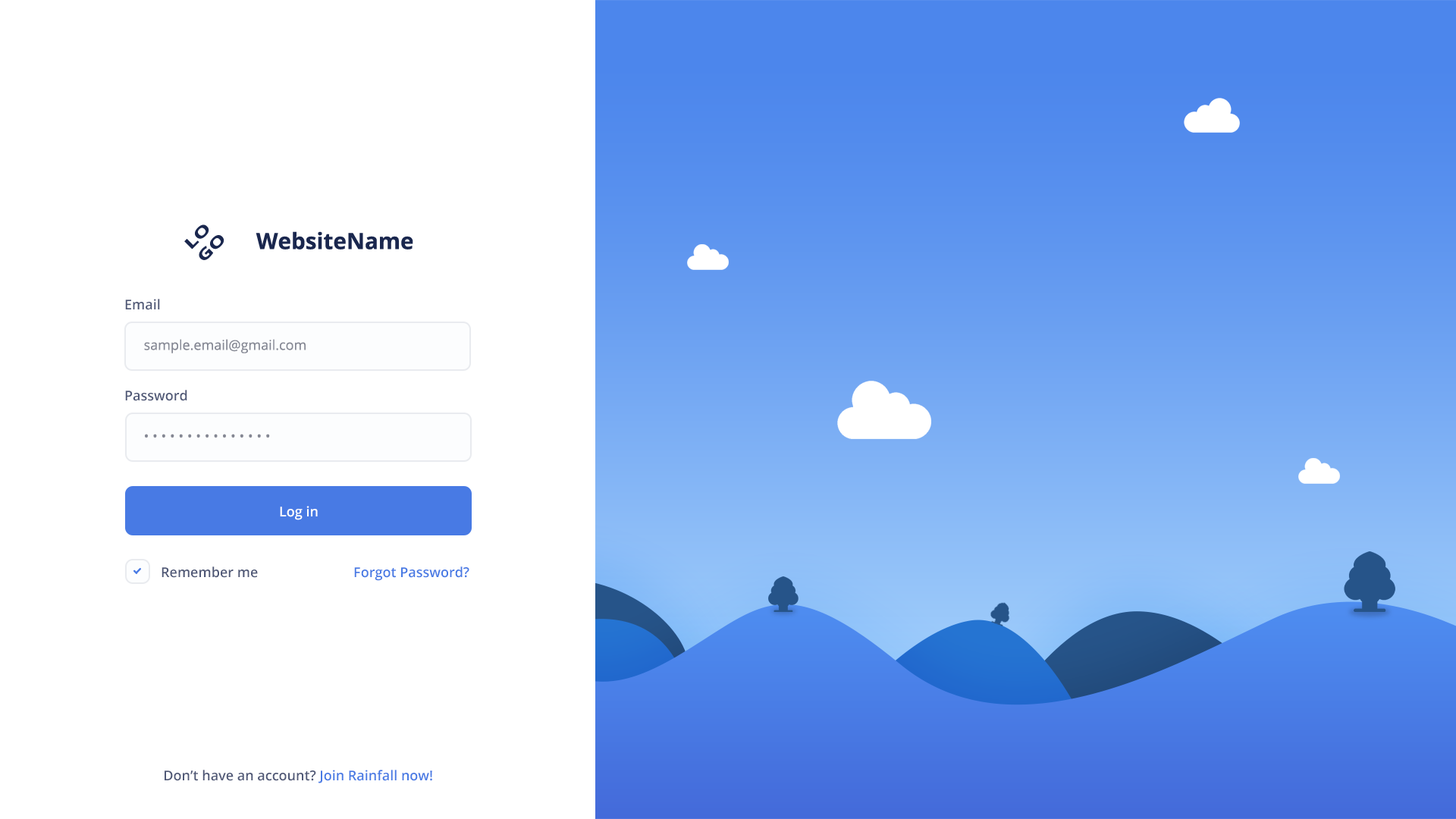
<style>
.page{position:relative;width:1456px;height:819px;background:#ffffff}
.page>*{position:absolute;margin:0}
.t1{font:15px "OpenSans-Bold";color:#1a274e;scale:1.45 1}
.t2{font:22.5px "OpenSans-Bold";color:#1a274e}
.t3{font:13.6px "OpenSans-Semibold";color:#505977}
.t4{font:13.6px "OpenSans";color:#858894}
.t5{font:13.6px "OpenSans-Semibold";color:#ffffff}
.t6{font:13.6px "OpenSans-Semibold";color:#487ae4}
</style>
<div class="page">
<p class="t1" style="left:184px;top:224px;width:40px;height:36px;rotate:-45deg">LO<br>GO</p>
<p class="t2" style="left:256px;top:231px;width:157px;height:18px">WebsiteName</p>
<p class="t3" style="left:125px;top:299px;width:35px;height:11px">Email</p>
<p class="t4" style="left:144px;top:339px;width:162px;height:14px">sample.email@gmail.com</p>
<p class="t3" style="left:125px;top:390px;width:62px;height:11px">Password</p>
<p class="t4" style="left:145px;top:434px;width:125px;height:4px">• • • • • • • • • • • • • • •</p>
<p class="t5" style="left:280px;top:506px;width:38px;height:14px">Log in</p>
<p class="t3" style="left:162px;top:566px;width:96px;height:12px">Remember me</p>
<p class="t6" style="left:354px;top:566px;width:115px;height:15px">Forgot Password?</p>
<p class="t3" style="left:165px;top:770px;width:267px;height:13px">Don’t have an account?<span class="t6"> Join Rainfall now!</span></p>
</div>
